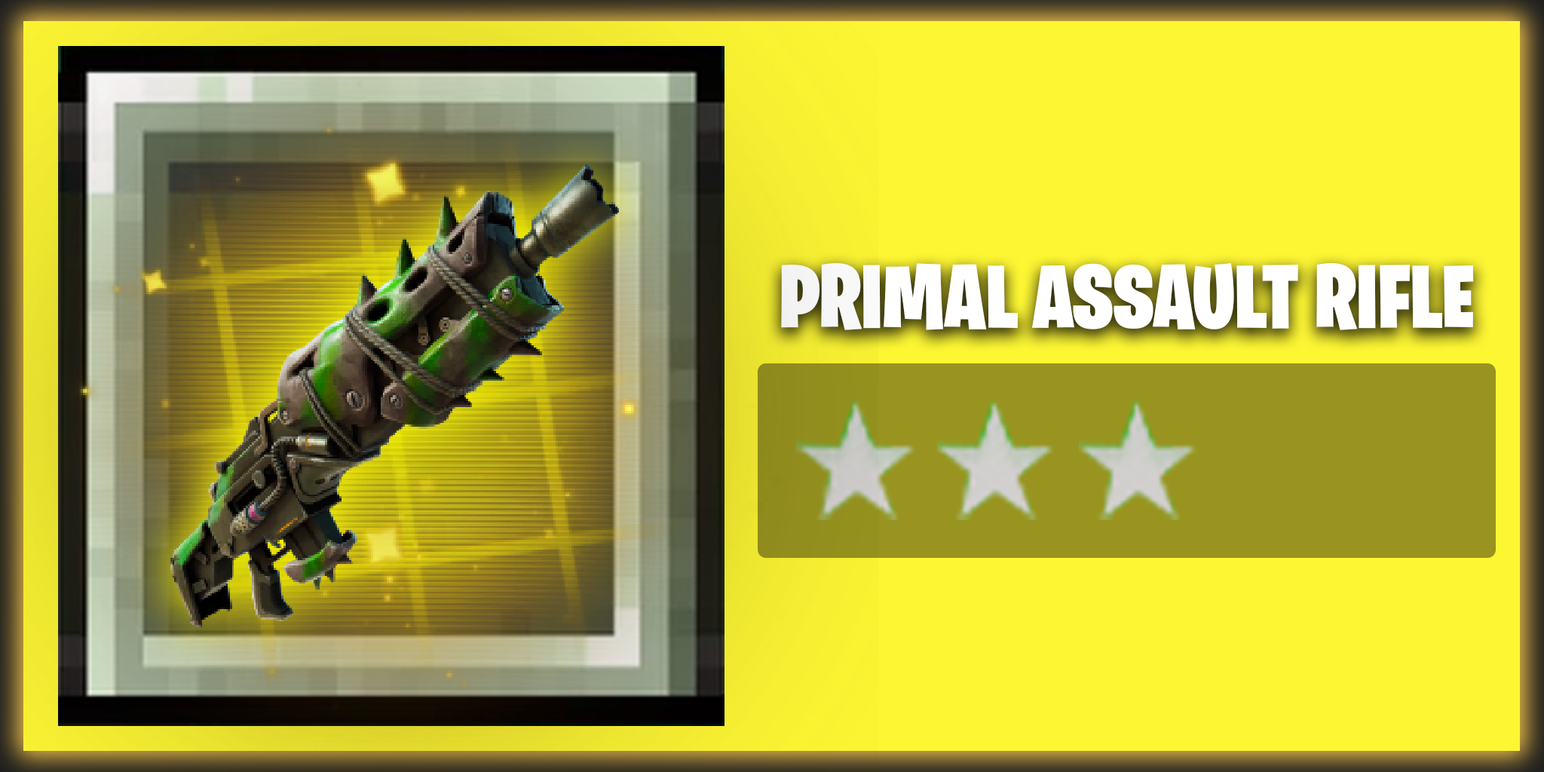
<style>
.page{position:relative;width:1544px;height:772px;background:#fdf633}
.page>*{position:absolute;margin:0}
.t1{font:90.5px "BurbankBigCondensed-Black";color:#ffffff}
</style>
<div class="page">
<p class="t1" style="left:781px;top:263px;width:693px;height:67px">PRIMAL ASSAULT RIFLE</p>
</div>
